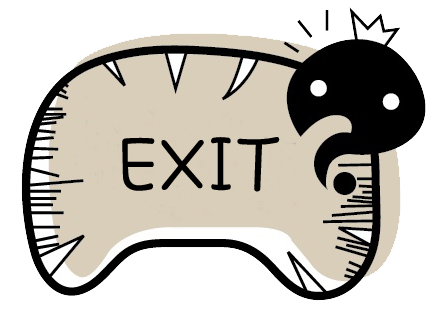
<style>
.page{position:relative;width:443px;height:318px;background:#ffffff}
.page>*{position:absolute;margin:0}
.t1{font:80px "365sunbeams";color:#000000}
</style>
<div class="page">
<p class="t1" style="left:122px;top:137px;width:158px;height:55px">EXIT</p>
</div>
